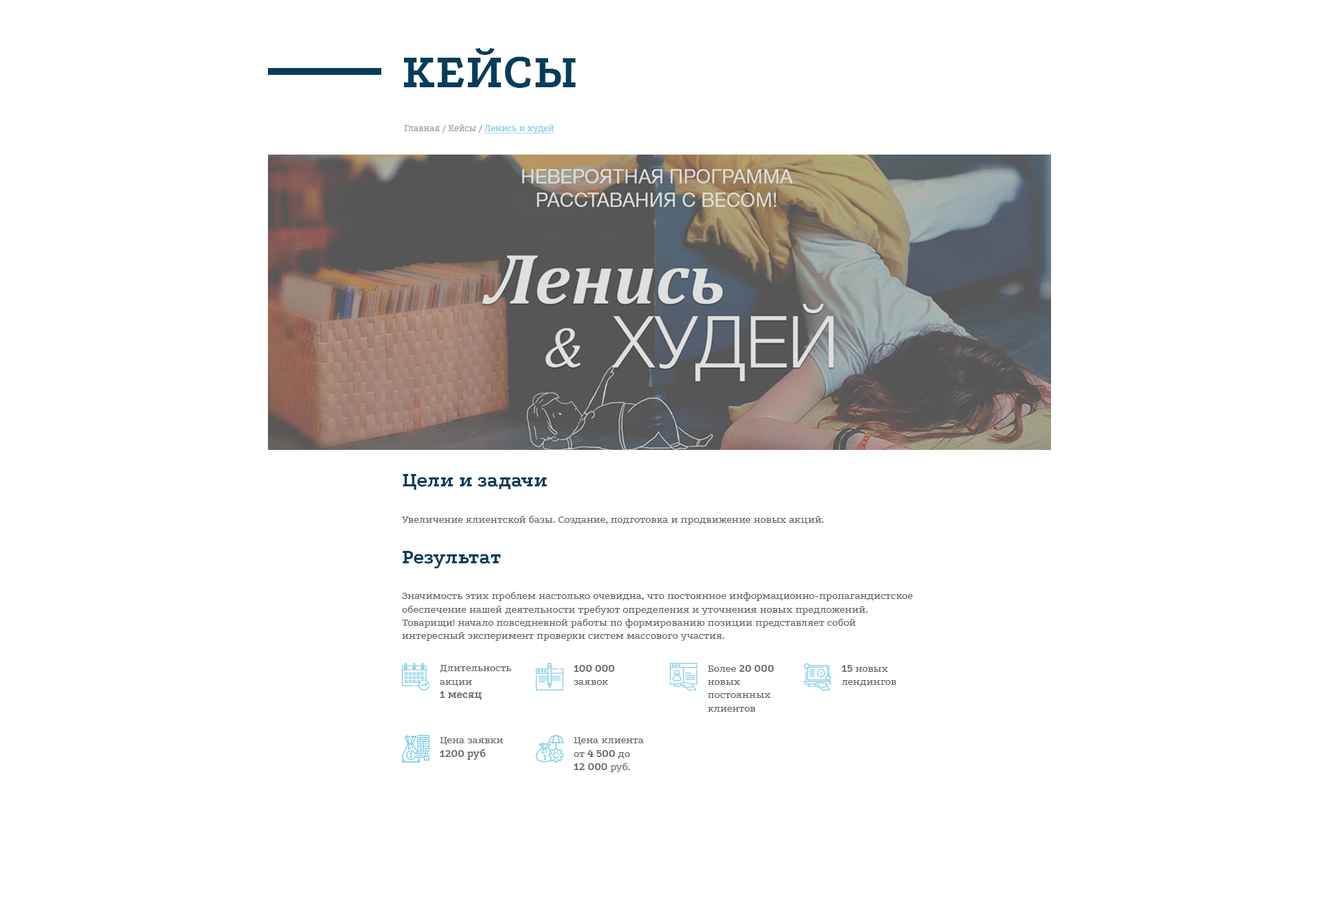
<style>
.page{position:relative;width:1319px;height:904px;background:#ffffff}
.page>*{position:absolute;margin:0}
.t1{font:49.5px "Podkova-Bold";color:#053c5c}
.t2{font:9.6px "Podkova-Regular";color:#999999}
.t3{font:9.6px "Podkova-Regular";color:#76c9e3;text-decoration:underline}
.t4{font:20.6px "Podkova-Bold";color:#053c5c}
.t5{font:11px "Podkova-Regular";color:#666666}
.t6{font:11px "Podkova-Bold";color:#666666}
</style>
<div class="page">
<p class="t1" style="left:404px;top:48px;width:172px;height:40px">КЕЙСЫ</p>
<p class="t2" style="left:404px;top:124px;width:150px;height:10px">Главная / Кейсы / <span class="t3">Ленись и худей</span></p>
<p class="t4" style="left:403px;top:474px;width:144px;height:16px">Цели и задачи</p>
<p class="t5" style="left:402px;top:515px;width:422px;height:10px">Увеличение клиентской базы. Создание, подготовка и продвижение новых акций.</p>
<p class="t4" style="left:403px;top:551px;width:98px;height:18px">Результат</p>
<p class="t5" style="left:402px;top:591px;width:511px;height:50px">Значимость этих проблем настолько очевидна, что постоянное информационно-пропагандистское обеспечение нашей деятельности требуют определения и уточнения новых предложений. Товарищи! начало повседневной работы по формированию позиции представляет собой интересный эксперимент проверки систем массового участия.</p>
<p class="t5" style="left:440px;top:665px;width:72px;height:35px">Длительность акции <br><span class="t6">1 месяц</span></p>
<p class="t6" style="left:574px;top:665px;width:41px;height:20px">100 000<span class="t5"> заявок</span></p>
<p class="t5" style="left:708px;top:665px;width:66px;height:47px">Более <span class="t6">20 000 </span>новых постоянных клиентов</p>
<p class="t5" style="left:842px;top:665px;width:54px;height:21px"><span class="t6">15 </span>новых лендингов</p>
<p class="t5" style="left:440px;top:737px;width:63px;height:23px">Цена заявки <span class="t6">1200 руб</span></p>
<p class="t5" style="left:574px;top:737px;width:70px;height:35px">Цена клиента от <span class="t6">4 500</span> до <br><span class="t6">12 000 </span>руб.</p>
</div>
